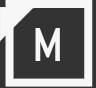
<style>
.page{position:relative;width:96px;height:88px;background:#333333}
.page>*{position:absolute;margin:0}
.t1{font:47.3px "Montserrat-Bold";letter-spacing:0.08em;color:#f7f7f7;scale:0.65 1}
</style>
<div class="page">
<p class="t1" style="left:35px;top:28px;width:25px;height:33px">M</p>
</div>
